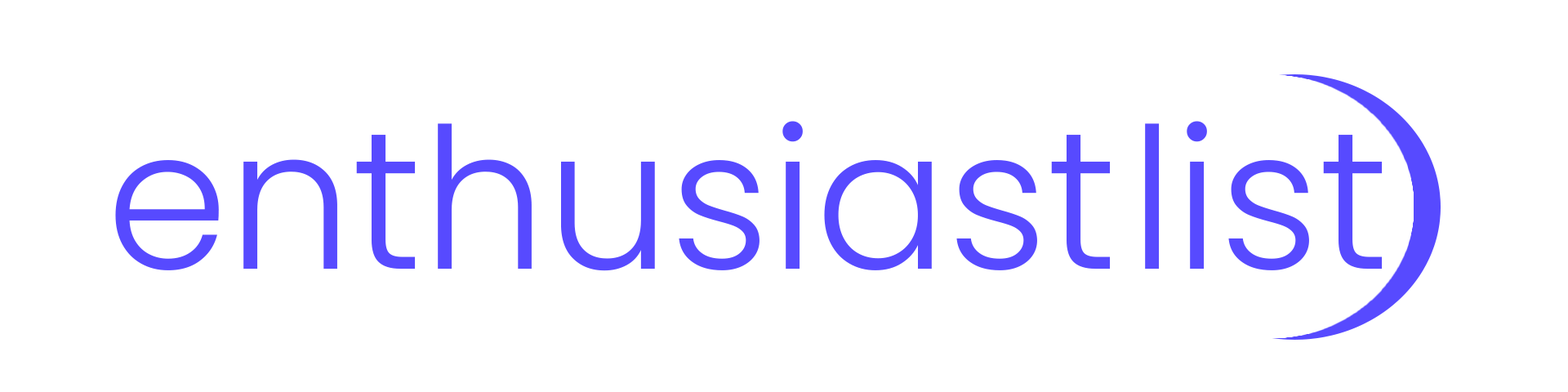
<style>
.page{position:relative;width:1568px;height:392px;background:#ffffff}
.page>*{position:absolute;margin:0}
.t1{font:196px "Poppins-Light";color:#574aff}
</style>
<div class="page">
<p class="t1" style="left:115px;top:121px;width:996px;height:150px">enthusiast</p>
<p class="t1" style="left:1145px;top:121px;width:238px;height:149px">list</p>
</div>
